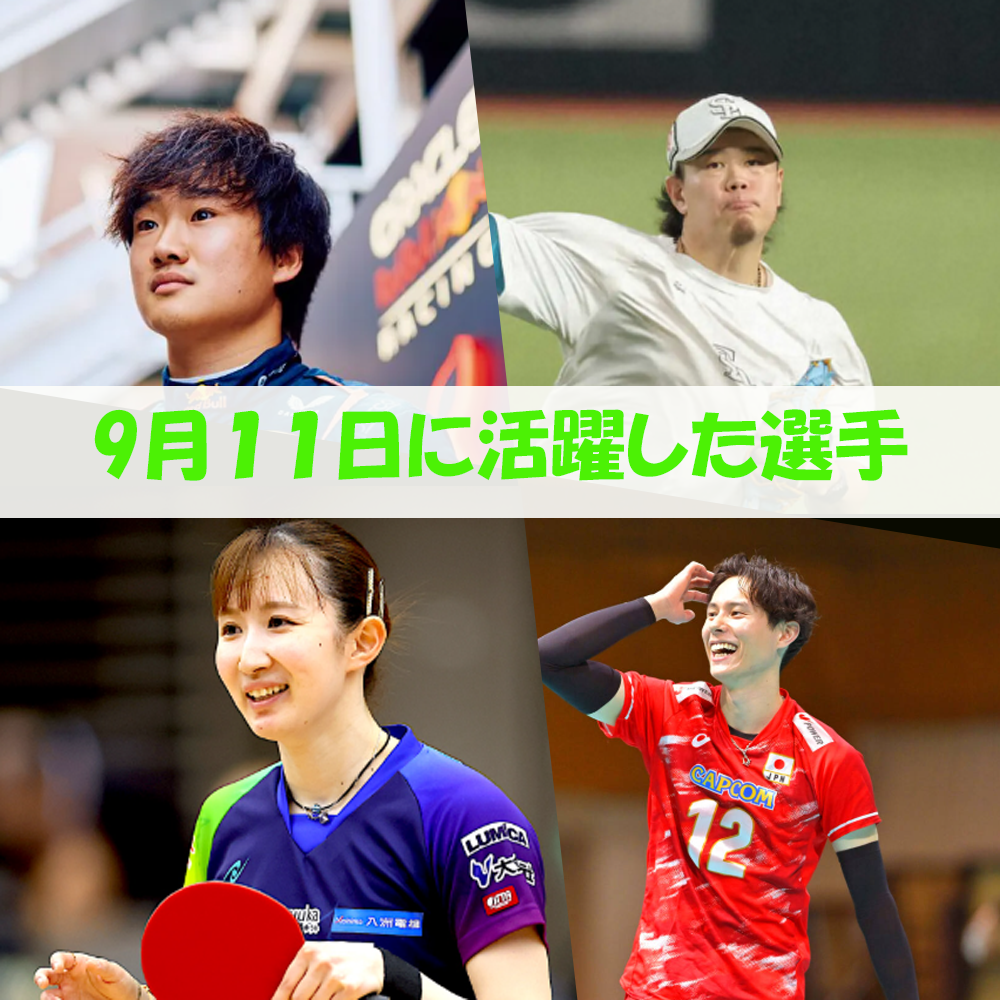
<style>
.page{position:relative;width:1000px;height:1000px}
.page>*{position:absolute;margin:0}
.t1{font:75px "HGPSoeiKakupoptai";color:#4cf105}
</style>
<div class="page">
<p class="t1" style="left:94px;top:409px;width:814px;height:72px">9月１１日に活躍した選手</p>
</div>
